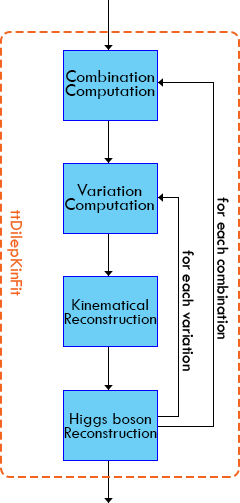
<style>
.page{position:relative;width:240px;height:503px;background:#ffffff}
.page>*{position:absolute;margin:0}
.t1{font:18px/14px "TwCenMT-Regular";color:#000000}
.t2{font:17px "TwCenMT-Regular";color:#000000}
.t3{font:18px "TwCenMT-Regular";color:#f26522}
.t4{font:17px/14px "TwCenMT-Regular";color:#000000}
</style>
<div class="page">
<p class="t1" style="left:65px;top:70px;width:90px;height:29px;text-align:center">Combination<br>Computation</p>
<p class="t1" style="left:65px;top:184px;width:89px;height:29px;text-align:center">Variation<br>Computation</p>
<p class="t2" style="left:217px;top:197px;width:12px;height:142px;rotate:90deg">for each combination</p>
<p class="t3" style="left:7px;top:210px;width:16px;height:86px;rotate:90deg">ttDilepKinFit</p>
<p class="t2" style="left:182px;top:250px;width:12px;height:121px;rotate:90deg">for each variation</p>
<p class="t4" style="left:64px;top:299px;width:93px;height:25px;text-align:center">Kinematical<br>Reconstruction</p>
<p class="t4" style="left:64px;top:413px;width:93px;height:25px;text-align:center">Higgs boson<br>Reconstruction</p>
</div>
